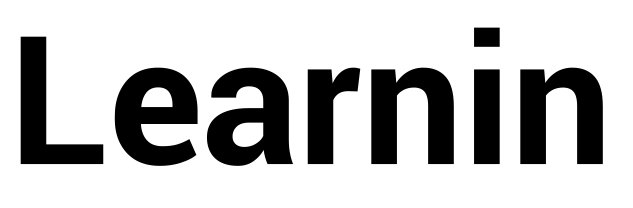
<style>
.page{position:relative;width:633px;height:208px;background:#ffffff}
.page>*{position:absolute;margin:0}
.t1{font:179.2px "Roboto-Bold";color:#000000}
</style>
<div class="page">
<p class="t1" style="left:20px;top:27px;width:583px;height:139px">Learnin</p>
</div>
